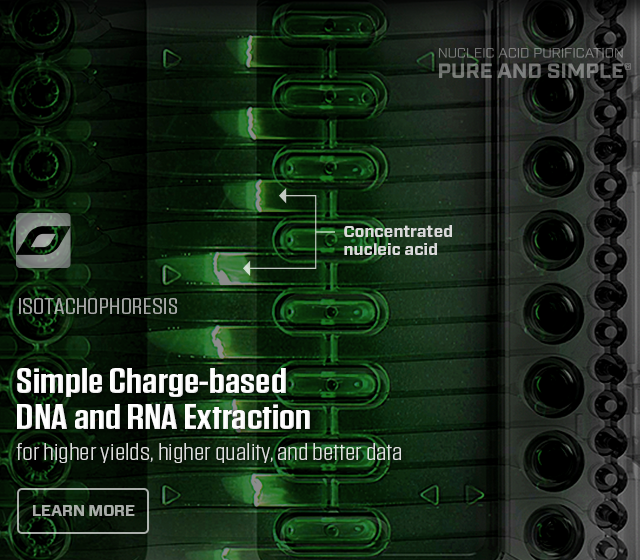
<style>
.page{position:relative;width:640px;height:560px}
.page>*{position:absolute;margin:0}
.t1{font:16px/18px "Forza-Bold";color:#dadada}
.t2{font:22px "Tungsten-Book";color:#a5a7a5;text-transform:uppercase;scale:1.45 1}
.t3{font:35px/36px "Tungsten-Semibold";color:#ffffff;scale:1.31 1}
.t4{font:24px "Tungsten-Light";color:#dedfde;scale:1.35 1}
.t5{font:15.7px "Forza-Bold";letter-spacing:-0.01em;color:#a7aca7;text-transform:uppercase}
</style>
<div class="page">
<p class="t1" style="left:344px;top:225px;width:108px;height:30px">Concentrated<br>nucleic acid</p>
<p class="t2" style="left:19px;top:298px;width:158px;height:16px">Isotachophoresis</p>
<p class="t3" style="left:17px;top:368px;width:293px;height:61px">Simple Charge-based<br>DNA and RNA Extraction</p>
<p class="t4" style="left:16px;top:443px;width:385px;height:20px">for higher yields, higher quality, and better data</p>
<p class="t5" style="left:33px;top:505px;width:102px;height:11px">Learn More</p>
</div>
